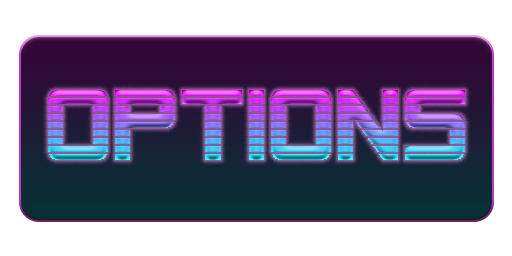
<style>
.page{position:relative;width:512px;height:256px;background:#ffffff}
.page>*{position:absolute;margin:0}
.t1{font:100px "AlienEncounters";letter-spacing:0.01em}
</style>
<div class="page">
<p class="t1" style="left:48px;top:90px;width:417px;height:70px">OPTIONS</p>
</div>
